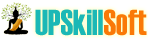
<style>
.page{position:relative;width:148px;height:44px;background:#ffffff}
.page>*{position:absolute;margin:0}
.t1{font:36px "Haettenschweiler";color:#1bb8b6;scale:0.92 1}
.t2{font:36px "Haettenschweiler";color:#fa7907;scale:0.92 1}
</style>
<div class="page">
<p class="t1" style="left:35px;top:9px;width:112px;height:27px">UPSkill<span class="t2">Soft</span></p>
</div>
